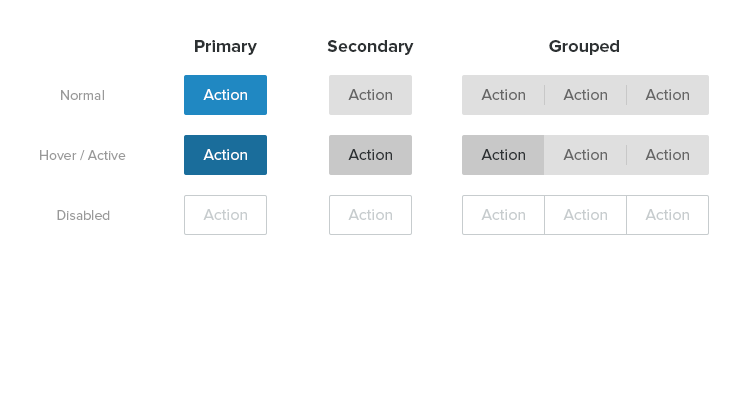
<style>
.page{position:relative;width:740px;height:400px;background:#ffffff}
.page>*{position:absolute;margin:0}
.t1{font:18px "ProximaNova-Bold";color:#2d3133}
.t2{font:16px "ProximaNova-Regular";color:#ffffff}
.t3{font:16px "ProximaNova-Regular";color:#666666}
.t4{font:14px "ProximaNova-Regular";color:#999999}
.t5{font:16px "ProximaNova-Regular";color:#2d3133}
.t6{font:16px "ProximaNova-Regular";color:#c7ccce}
</style>
<div class="page">
<p class="t1" style="left:195px;top:40px;width:62px;height:15px">Primary</p>
<p class="t1" style="left:327px;top:40px;width:87px;height:15px">Secondary</p>
<p class="t1" style="left:549px;top:40px;width:70px;height:15px">Grouped</p>
<p class="t2" style="left:203px;top:89px;width:44px;height:11px">Action</p>
<p class="t3" style="left:348px;top:89px;width:44px;height:11px">Action</p>
<p class="t3" style="left:481px;top:89px;width:44px;height:11px">Action</p>
<p class="t3" style="left:563px;top:89px;width:44px;height:11px">Action</p>
<p class="t3" style="left:645px;top:89px;width:44px;height:11px">Action</p>
<p class="t4" style="left:61px;top:90px;width:43px;height:10px">Normal</p>
<p class="t4" style="left:40px;top:150px;width:86px;height:11px">Hover / Active</p>
<p class="t2" style="left:203px;top:149px;width:44px;height:11px">Action</p>
<p class="t5" style="left:348px;top:149px;width:44px;height:11px">Action</p>
<p class="t5" style="left:481px;top:149px;width:44px;height:11px">Action</p>
<p class="t3" style="left:563px;top:149px;width:44px;height:11px">Action</p>
<p class="t3" style="left:645px;top:149px;width:44px;height:11px">Action</p>
<p class="t6" style="left:203px;top:209px;width:44px;height:11px">Action</p>
<p class="t6" style="left:348px;top:209px;width:44px;height:11px">Action</p>
<p class="t6" style="left:481px;top:209px;width:44px;height:11px">Action</p>
<p class="t6" style="left:563px;top:209px;width:44px;height:11px">Action</p>
<p class="t6" style="left:645px;top:209px;width:44px;height:11px">Action</p>
<p class="t4" style="left:57px;top:210px;width:53px;height:10px">Disabled</p>
</div>
